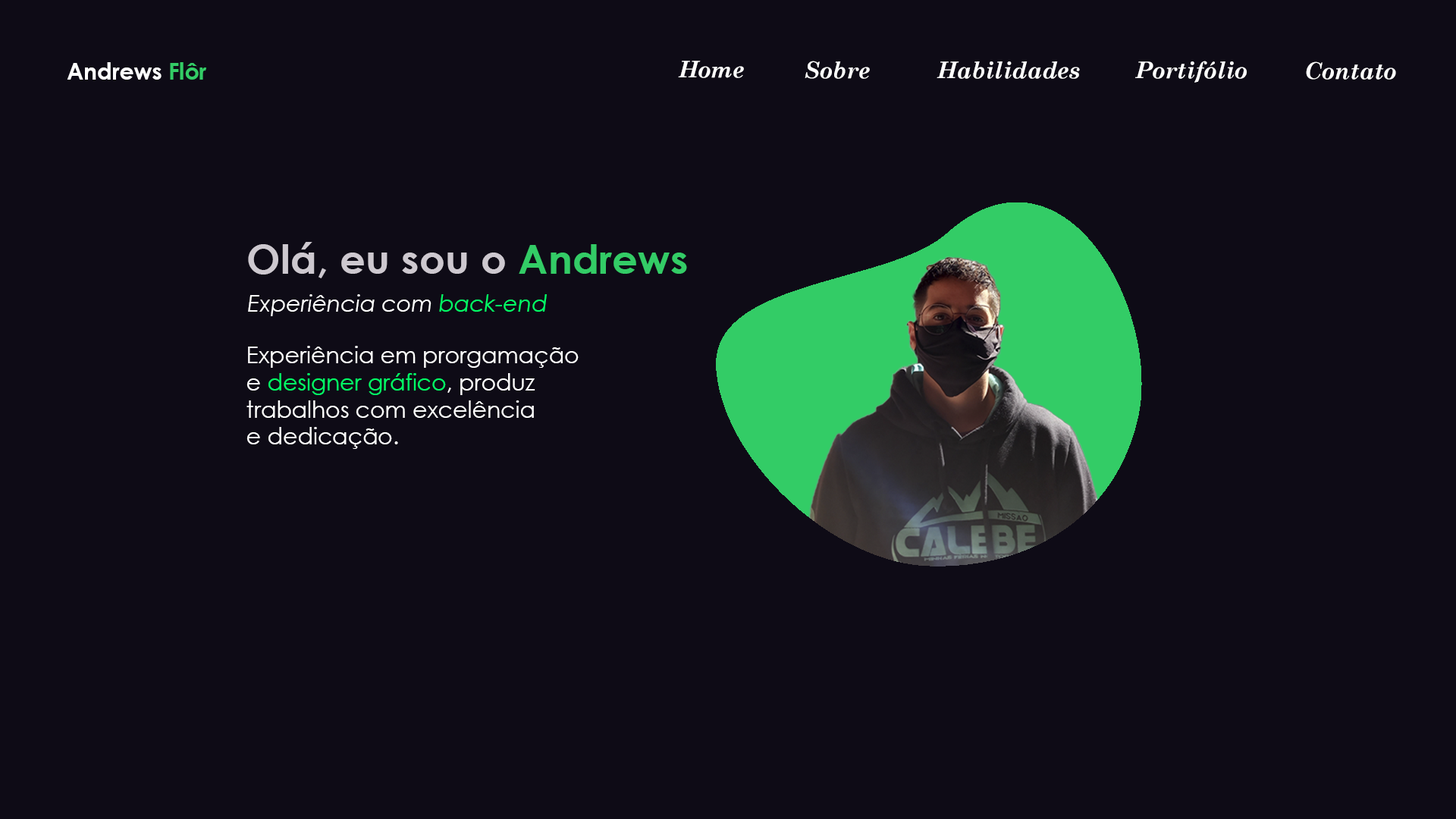
<style>
.page{position:relative;width:1456px;height:819px;background:#0e0b16}
.page>*{position:absolute;margin:0}
.t1{font:22.7px "CenturyGothic-Bold";color:#ffffff}
.t2{font:22.7px "CenturyGothic-Bold";color:#33cc66}
.t3{font:22.7px "CenturySchoolbook-BoldItalic";color:#ffffff}
.t4{font:40.5px "CenturyGothic-Bold";color:#cdc8cf}
.t5{font:40.5px "CenturyGothic-Bold";color:#33cc66}
.t6{font:22.7px "CenturyGothic-Italic";color:#ffffff}
.t7{font:22.7px "CenturyGothic-Italic";color:#00ff66}
.t8{font:22.7px "CenturyGothic";color:#ffffff}
.t9{font:22.7px "CenturyGothic";color:#00ff66}
</style>
<div class="page">
<p class="t1" style="left:67px;top:62px;width:139px;height:18px">Andrews <span class="t2">Flôr</span></p>
<p class="t3" style="left:678px;top:61px;width:66px;height:17px">Home</p>
<p class="t3" style="left:805px;top:61px;width:65px;height:18px">Sobre</p>
<p class="t3" style="left:937px;top:61px;width:143px;height:18px">Habilidades</p>
<p class="t3" style="left:1135px;top:61px;width:112px;height:22px">Portifólio</p>
<p class="t3" style="left:1306px;top:61px;width:90px;height:19px">Contato</p>
<p class="t4" style="left:248px;top:242px;width:439px;height:36px">Olá, eu sou o <span class="t5">Andrews</span></p>
<p class="t6" style="left:248px;top:294px;width:299px;height:22px">Experiência com <span class="t7">back-end</span></p>
<p class="t8" style="left:246px;top:346px;width:333px;height:103px">Experiência em prorgamação<br>e <span class="t9">designer gráfico</span>, produz<br>trabalhos com excelência<br>e dedicação.</p>
</div>
